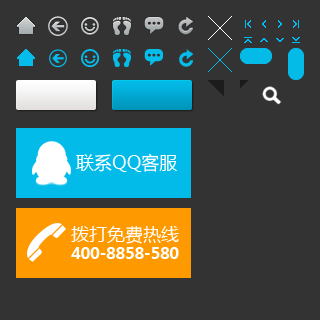
<style>
.page{position:relative;width:320px;height:320px;background:#333333}
.page>*{position:absolute;margin:0}
.t1{font:18px "MicrosoftYaHei";color:#ffffff}
.t2{font:16px "MicrosoftYaHei-Bold";letter-spacing:-0.025em;color:#ffffff}
</style>
<div class="page">
<p class="t1" style="left:76px;top:153px;width:102px;height:19px">联系QQ客服</p>
<p class="t1" style="left:71px;top:226px;width:108px;height:18px">拨打免费热线</p>
<p class="t2" style="left:71px;top:247px;width:108px;height:12px">400-8858-580</p>
</div>
